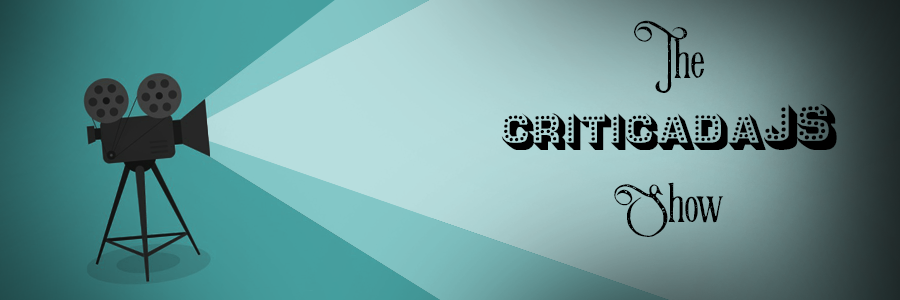
<style>
.page{position:relative;width:900px;height:300px}
.page>*{position:absolute;margin:0}
.t1{font:60px "Tonight";color:#000000}
.t2{font:60px "VictorianParlorVintageAlternate";color:#000000}
</style>
<div class="page">
<p class="t1" style="left:501px;top:20px;width:336px;height:217px;text-align:center"><span class="t2">The<br></span>criticadaJS<br><span class="t2">Show</span></p>
</div>
